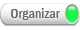
<style>
.page{position:relative;width:80px;height:30px;background:#ffffff}
.page>*{position:absolute;margin:0}
.t1{font:14px "FranklinGothic-MediumCond";color:#666666}
</style>
<div class="page">
<p class="t1" style="left:11px;top:8px;width:49px;height:12px">Organizar</p>
</div>
